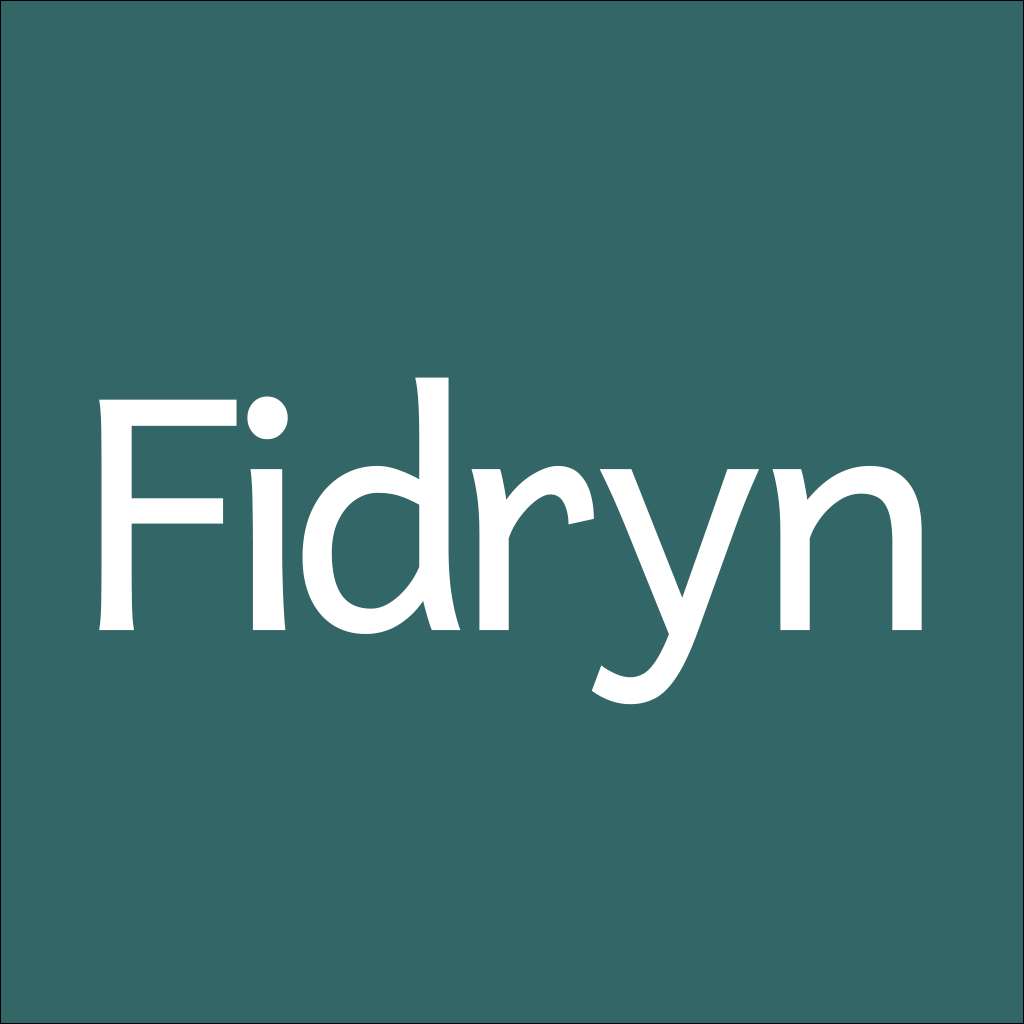
<style>
.page{position:relative;width:1024px;height:1024px;background:#336666}
.page>*{position:absolute;margin:0}
.t1{font:323px "Andika";color:#ffffff}
.t2{font:323px "Andika";letter-spacing:-0.1em;color:#ffffff}
</style>
<div class="page">
<p class="t1" style="left:99px;top:377px;width:823px;height:328px"><span class="t2">F</span>idryn</p>
</div>
